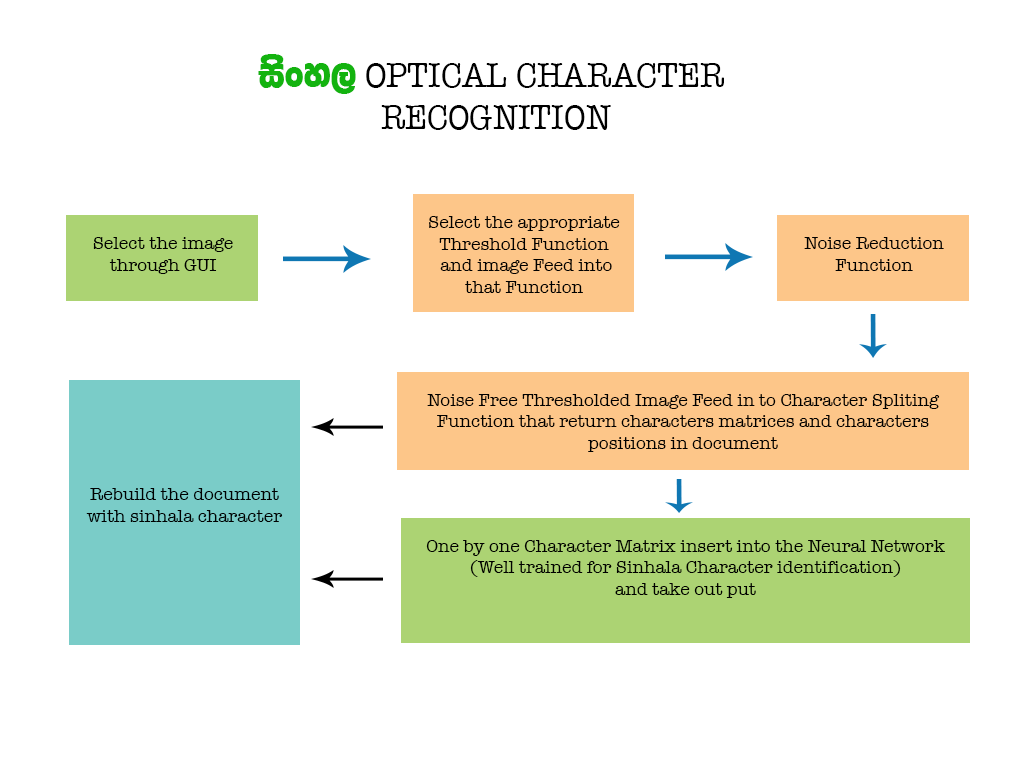
<style>
.page{position:relative;width:1024px;height:768px;background:#ffffff}
.page>*{position:absolute;margin:0}
.t1{font:35.3px "AmericanTypewriter";color:#000000;scale:0.93 1}
.t2{font:47px "4u-Asirix";color:#13b30f;scale:0.93 1}
.t3{font:18px "AmericanTypewriter";color:#000000}
.t4{font:18px "AmericanTypewriter";color:#0f77b3}
</style>
<div class="page">
<p class="t1" style="left:258px;top:54px;width:466px;height:76px;text-align:center"><span class="t2">isxy,</span> OPTICAL CHARACTER <br>RECOGNITION</p>
<p class="t3" style="left:429px;top:216px;width:191px;height:77px;text-align:center">Select the appropriate Threshold Function<br> and image Feed into that Function</p>
<p class="t3" style="left:93px;top:237px;width:140px;height:37px;text-align:center">Select the image through GUI</p>
<p class="t3" style="left:804px;top:237px;width:140px;height:34px;text-align:center">Noise Reduction Function</p>
<p class="t3" style="left:427px;top:394px;width:513px;height:58px;text-align:center"><span class="t4"><br></span>Noise Free Thresholded Image Feed in to Character Spliting Function that return characters matrices and characters<br>positions in document</p>
<p class="t3" style="left:86px;top:488px;width:197px;height:34px;text-align:center">Rebuild the document with sinhala character</p>
<p class="t3" style="left:426px;top:540px;width:519px;height:58px;text-align:center">One by one Character Matrix insert into the Neural Network <br>(Well trained for Sinhala Character identification)<br>and take out put</p>
</div>
